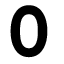
<style>
.page{position:relative;width:64px;height:64px;background:#ffffff}
.page>*{position:absolute;margin:0}
.t1{font:66.7px "(ÇÑ)°¢¸Ó¸®D";color:#000000}
</style>
<div class="page">
<p class="t1" style="left:10px;top:5px;width:38px;height:53px">0</p>
</div>
